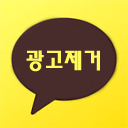
<style>
.page{position:relative;width:128px;height:128px;background:#482c2b}
.page>*{position:absolute;margin:0}
.t1{font:22px "MoeumTR-HM";letter-spacing:0.03em;color:#fff95b;font-weight:bold}
</style>
<div class="page">
<p class="t1" style="left:26px;top:50px;width:74px;height:22px">광고제거</p>
</div>
